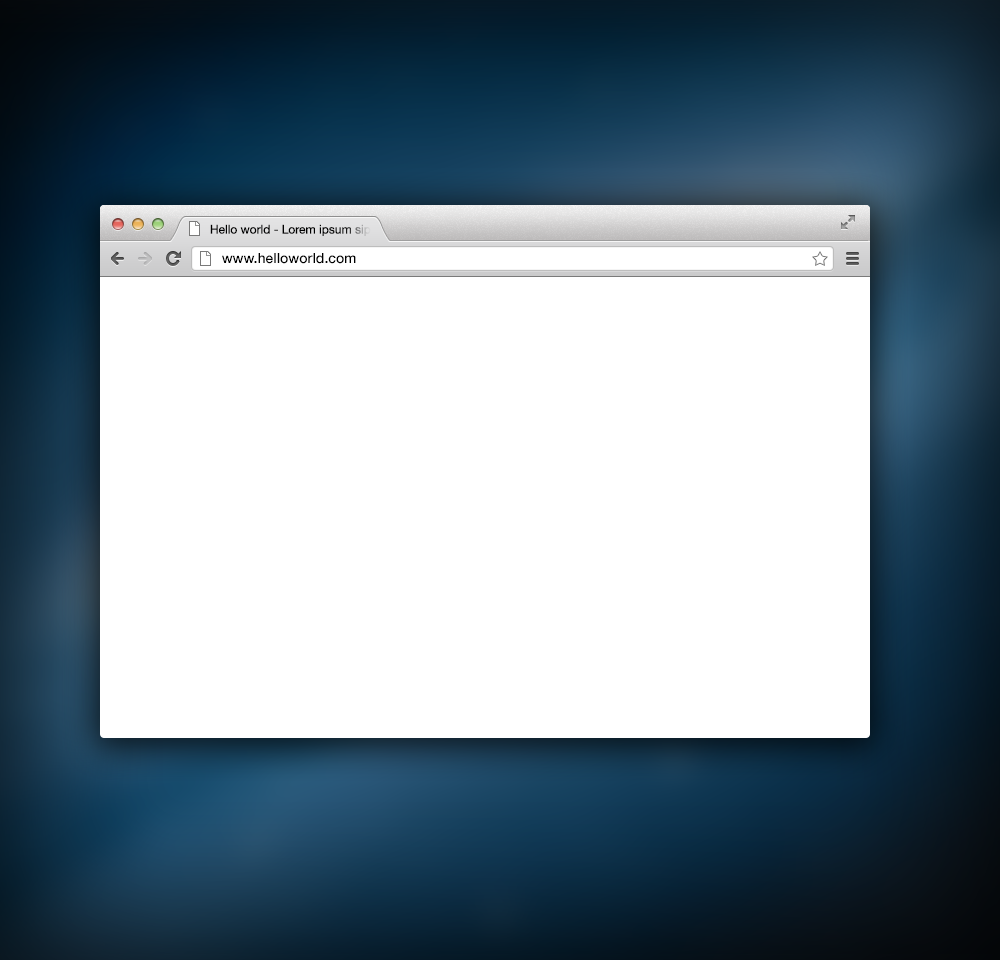
<style>
.page{position:relative;width:1000px;height:960px;background:#ffffff}
.page>*{position:absolute;margin:0}
.t1{font:12px "HelveticaNeue";color:#000000}
.t2{font:14px "HelveticaNeue-Medium";color:#000000}
</style>
<div class="page">
<p class="t1" style="left:210px;top:224px;width:161px;height:12px">Hello world - Lorem ipsum sip</p>
<p class="t2" style="left:222px;top:253px;width:134px;height:11px">www.helloworld.com</p>
</div>
